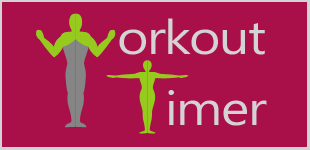
<style>
.page{position:relative;width:310px;height:150px;background:#a91049}
.page>*{position:absolute;margin:0}
.t1{font:48px "SegoeUI";letter-spacing:-0.025em;color:#d3d3d3;scale:1.12 1}
</style>
<div class="page">
<p class="t1" style="left:119px;top:18px;width:146px;height:37px">orkout</p>
<p class="t1" style="left:168px;top:90px;width:99px;height:36px">imer</p>
</div>
